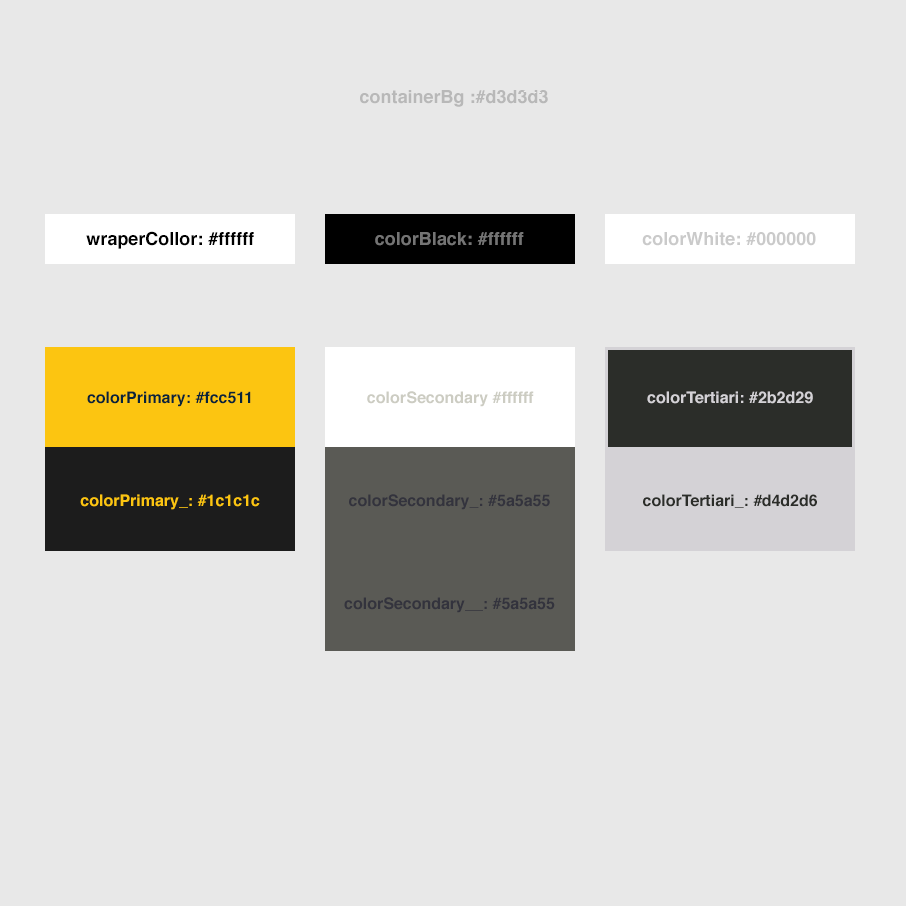
<style>
.page{position:relative;width:906px;height:906px;background:#e8e8e8}
.page>*{position:absolute;margin:0}
.t1{font:18px "Helvetica-Bold";color:#b8b8b8}
.t2{font:18px "Helvetica-Bold";color:#000000}
.t3{font:18px "Helvetica-Bold";color:#747474}
.t4{font:18px "Helvetica-Bold";color:#cacaca}
.t5{font:16px/103px "Helvetica-Bold";color:#fcc511}
.t6{font:16px/103px "Helvetica-Bold";color:#092439}
</style>
<div class="page">
<p class="t1" style="left:360px;top:90px;width:187px;height:17px">containerBg :#2b2d29</p>
<p class="t1" style="left:360px;top:90px;width:188px;height:17px">containerBg :#d3d3d3</p>
<p class="t2" style="left:86px;top:231px;width:168px;height:18px">wraperCollor: #ffffff</p>
<p class="t2" style="left:86px;top:231px;width:168px;height:18px">wraperCollor: #ffffff</p>
<p class="t3" style="left:375px;top:232px;width:149px;height:14px">colorBlack: #ffffff</p>
<p class="t3" style="left:375px;top:232px;width:149px;height:14px">colorBlack: #ffffff</p>
<p class="t4" style="left:642px;top:232px;width:174px;height:14px">colorWhite: #000000</p>
<p class="t4" style="left:642px;top:232px;width:174px;height:14px">colorWhite: #000000</p>
<p class="t5" style="left:80px;top:391px;width:180px;height:119px;text-align:center"><span class="t6">colorPrimary: #fcc511<br></span>colorPrimary_: #1c1c1c</p>
</div>
